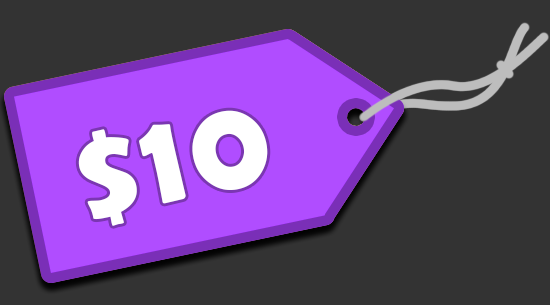
<style>
.page{position:relative;width:550px;height:305px;background:#333333}
.page>*{position:absolute;margin:0}
.t1{font:128px "BerlinSansFBDemi-Bold";letter-spacing:0.05em;color:#ffffff}
</style>
<div class="page">
<p class="t1" style="left:78px;top:110px;width:190px;height:116px;rotate:-13deg">$10</p>
</div>
